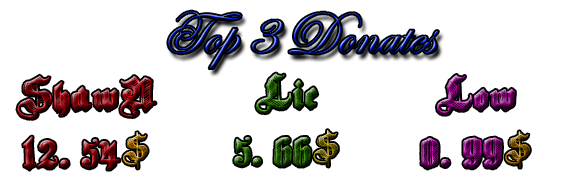
<style>
.page{position:relative;width:576px;height:192px;background:#ffffff}
.page>*{position:absolute;margin:0}
.t1{font:60px "EseninscriptOne"}
.t2{font:48px "SketchGothicSchool"}
</style>
<div class="page">
<p class="t1" style="left:168px;top:11px;width:270px;height:58px">Top 3 Donates</p>
<p class="t2" style="left:17px;top:75px;width:139px;height:95px;text-align:center">ShawN<br>12. 54$</p>
<p class="t2" style="left:234px;top:73px;width:104px;height:94px;text-align:center">Lie<br>5. 66$</p>
<p class="t2" style="left:421px;top:75px;width:109px;height:94px;text-align:center">Low<br>0. 99$</p>
</div>
